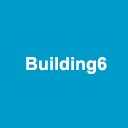
<style>
.page{position:relative;width:128px;height:128px;background:#009cc9}
.page>*{position:absolute;margin:0}
.t1{font:18px "Arial-BoldMT";color:#ffffff}
</style>
<div class="page">
<p class="t1" style="left:26px;top:57px;width:81px;height:17px">Building6</p>
</div>
